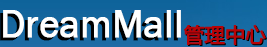
<style>
.page{position:relative;width:267px;height:47px}
.page>*{position:absolute;margin:0}
.t1{font:40px "FranklinGothic-Book";font-weight:bold;scale:0.94 1}
.t2{font:40px "FranklinGothic-Book";color:#ffffff;font-weight:bold;scale:0.94 1}
</style>
<div class="page">
<p class="t1" style="left:0px;top:13px;width:178px;height:28px">DreamMall</p>
<p class="t2" style="left:3px;top:10px;width:178px;height:28px">DreamMall</p>
</div>
